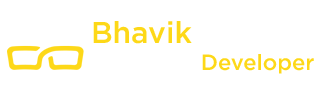
<style>
.page{position:relative;width:315px;height:92px;background:#ffffff}
.page>*{position:absolute;margin:0}
.t1{font:30px "Gotham-Medium";color:#ffffff}
.t2{font:30px "Gotham-Medium";color:#fdd818}
.t3{font:22px "Gotham-Medium";color:#fdd818}
.t4{font:22px "Gotham-Medium";color:#ffffff}
</style>
<div class="page">
<p class="t1" style="left:93px;top:21px;width:208px;height:23px"><span class="t2">Bhavik</span> Trivedi</p>
<p class="t3" style="left:94px;top:54px;width:220px;height:20px"><span class="t4">Frontend </span>Developer</p>
</div>
